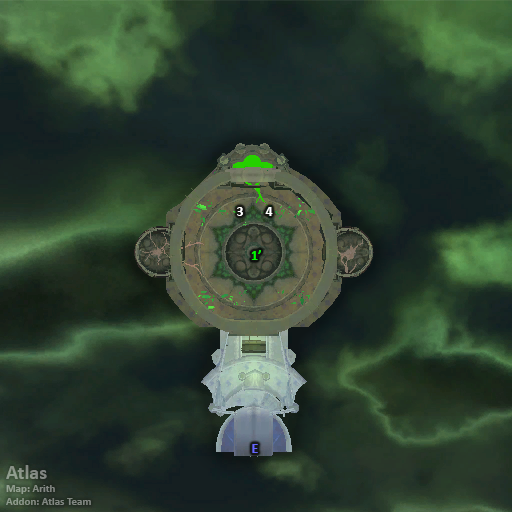
<style>
.page{position:relative;width:512px;height:512px}
.page>*{position:absolute;margin:0}
.t1{font:14px "Calibri-Bold";color:#ffffff}
.t2{font:14px "Calibri-Bold";color:#00ff00}
.t3{font:14px "Calibri-Bold";color:#6666ff}
.t4{font:11px "Calibri-Bold";color:#868f85}
.t5{font:20px "Calibri-Bold";color:#868f85}
</style>
<div class="page">
<p class="t1" style="left:237px;top:207px;width:6px;height:9px">3</p>
<p class="t1" style="left:265px;top:207px;width:8px;height:9px">4</p>
<p class="t2" style="left:251px;top:250px;width:10px;height:10px">1’</p>
<p class="t3" style="left:252px;top:444px;width:6px;height:9px">E</p>
<p class="t4" style="left:6px;top:465px;width:85px;height:40px"><span class="t5">Atlas<br></span>Map: Arith<br>Addon: Atlas Team</p>
</div>
